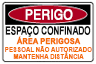
<style>
.page{position:relative;width:96px;height:64px;background:#ffffff}
.page>*{position:absolute;margin:0}
.t1{font:14px "Helvetica";color:#ffffff;font-weight:bold;scale:0.85 1}
.t2{font:11.4px "Arial-BoldMT";letter-spacing:-0.02em;color:#121212;font-weight:bold;scale:0.71 1}
.t3{font:8px "Arial-BoldMT";color:#f46c07;font-weight:bold;scale:0.91 1}
.t4{font:7px/7px "Arial-BoldMT";letter-spacing:-0.02em;color:#f46c07;scale:0.91 1}
</style>
<div class="page">
<p class="t1" style="left:25px;top:9px;width:48px;height:11px">PERIGO</p>
<p class="t2" style="left:5px;top:26px;width:86px;height:11px">ESPAÇO CONFINADO</p>
<p class="t3" style="left:16px;top:36px;width:65px;height:9px">ÁREA PERIGOSA</p>
<p class="t4" style="left:5px;top:46px;width:87px;height:13px;text-align:center">PESSOAL NÃO AUTORIZADO<br>MANTENHA DISTÂNCIA</p>
</div>
